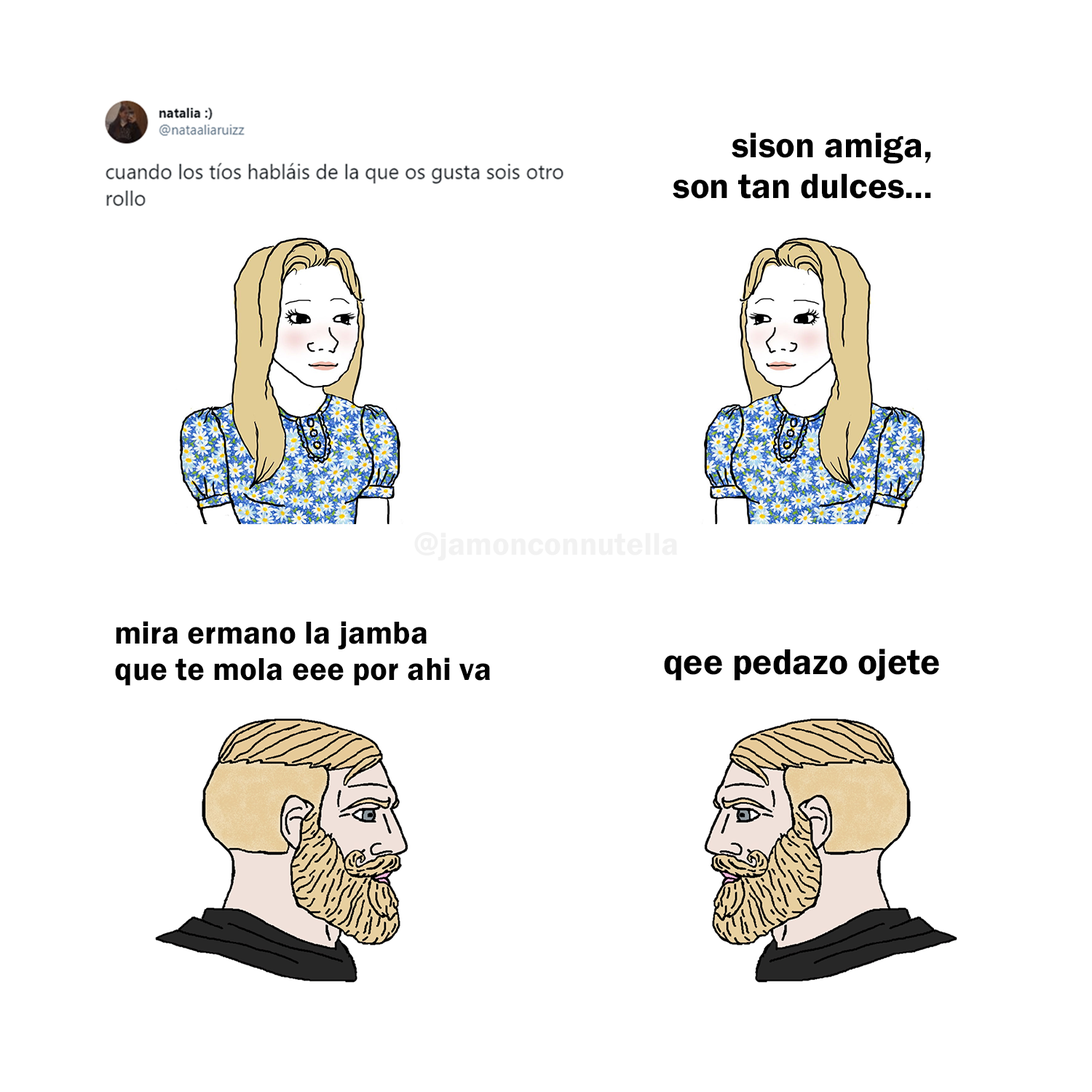
<style>
.page{position:relative;width:1092px;height:1092px;background:#ffffff}
.page>*{position:absolute;margin:0}
.t1{font:36.4px "FranklinGothic-Demi";color:#000000}
.t2{font:32.5px "FranklinGothic-Demi";color:#f2f2f2}
.t3{font:32.7px "FranklinGothic-Demi";color:#000000}
.t4{font:37.2px "FranklinGothic-Demi";color:#000000}
</style>
<div class="page">
<p class="t1" style="left:673px;top:132px;width:258px;height:67px;text-align:right">sison amiga,<br>son tan dulces...</p>
<p class="t2" style="left:414px;top:532px;width:263px;height:29px">@jamonconnutella</p>
<p class="t3" style="left:115px;top:621px;width:375px;height:65px">mira ermano la jamba<br>que te mola eee por ahi va</p>
<p class="t4" style="left:664px;top:649px;width:275px;height:32px">qee pedazo ojete</p>
</div>
